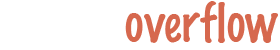
<style>
.page{position:relative;width:280px;height:50px;background:#ffffff}
.page>*{position:absolute;margin:0}
.t1{font:48.4px "MarkerFelt-Thin";letter-spacing:-0.025em;color:#d6684e;scale:0.91 1}
</style>
<div class="page">
<p class="t1" style="left:125px;top:1px;width:153px;height:42px">overflow</p>
</div>
